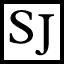
<style>
.page{position:relative;width:64px;height:64px;background:#ffffff}
.page>*{position:absolute;margin:0}
.t1{font:48px "PlantinMTStd-Regular";color:#000000}
.t2{font:12px "PlantinMTStd-Regular";color:#000000}
</style>
<div class="page">
<p class="t1" style="left:9px;top:10px;width:24px;height:34px">S</p>
<p class="t2" style="left:35px;top:14px;width:19px;height:42px">J</p>
</div>
